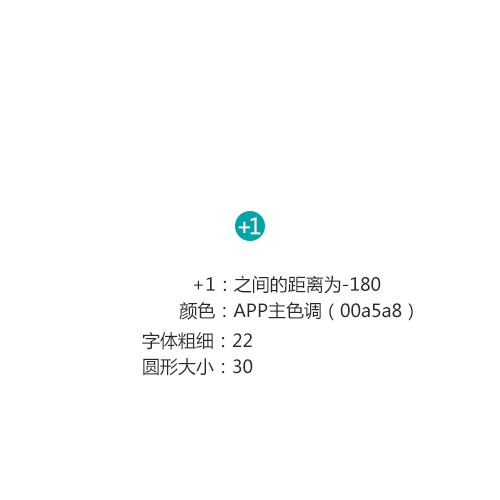
<style>
.page{position:relative;width:500px;height:500px;background:#ffffff}
.page>*{position:absolute;margin:0}
.t1{font:22px "MicrosoftYaHei";letter-spacing:-0.18em;color:#ffffff}
.t2{font:18px "MicrosoftYaHei";color:#282828}
</style>
<div class="page">
<p class="t1" style="left:238px;top:217px;width:23px;height:18px">+1</p>
<p class="t2" style="left:194px;top:275px;width:187px;height:19px">+1：之间的距离为-180</p>
<p class="t2" style="left:179px;top:302px;width:234px;height:19px">颜色：APP主色调（00a5a8）</p>
<p class="t2" style="left:142px;top:332px;width:110px;height:18px">字体粗细：22</p>
<p class="t2" style="left:143px;top:358px;width:110px;height:18px">圆形大小：30</p>
</div>
